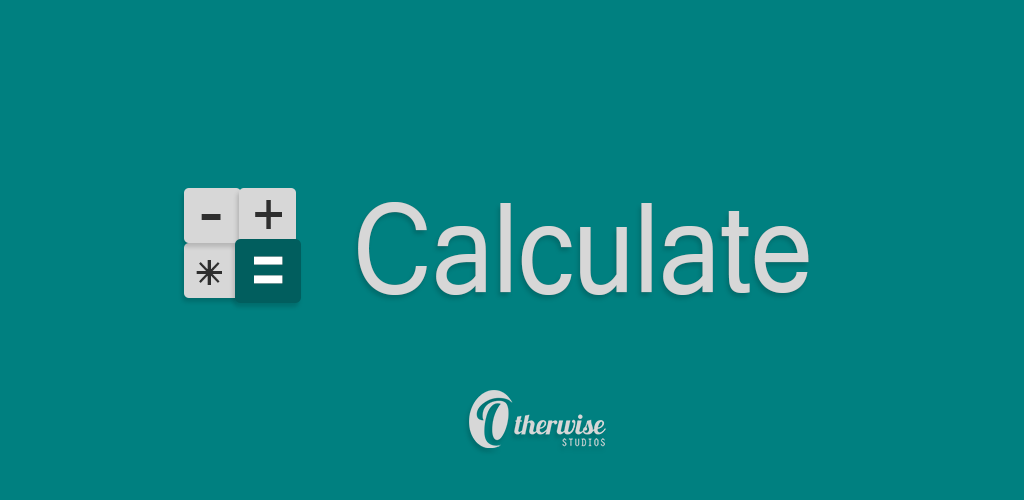
<style>
.page{position:relative;width:1024px;height:500px;background:#008080}
.page>*{position:absolute;margin:0}
.t1{font:70px "Gautami";color:#2e2e2e}
.t2{font:134.5px "Gautami";color:#d7d7d7;scale:0.88 1}
.t3{font:89.6px "Gautami";color:#ffffff}
</style>
<div class="page">
<p class="t1" style="left:255px;top:200px;width:27px;height:29px">+</p>
<p class="t2" style="left:358px;top:202px;width:451px;height:93px">Calculate</p>
<p class="t1" style="left:201px;top:214px;width:20px;height:6px">-</p>
<p class="t3" style="left:254px;top:256px;width:29px;height:28px">=</p>
<p class="t1" style="left:196px;top:260px;width:26px;height:25px">*</p>
</div>
